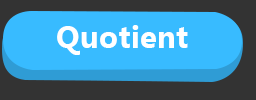
<style>
.page{position:relative;width:256px;height:100px;background:#38bbff}
.page>*{position:absolute;margin:0}
.t1{font:31px "Ebrima-Bold";letter-spacing:0.01em;color:#ffffff}
</style>
<div class="page">
<p class="t1" style="left:57px;top:25px;width:131px;height:30px">Quotient</p>
</div>
